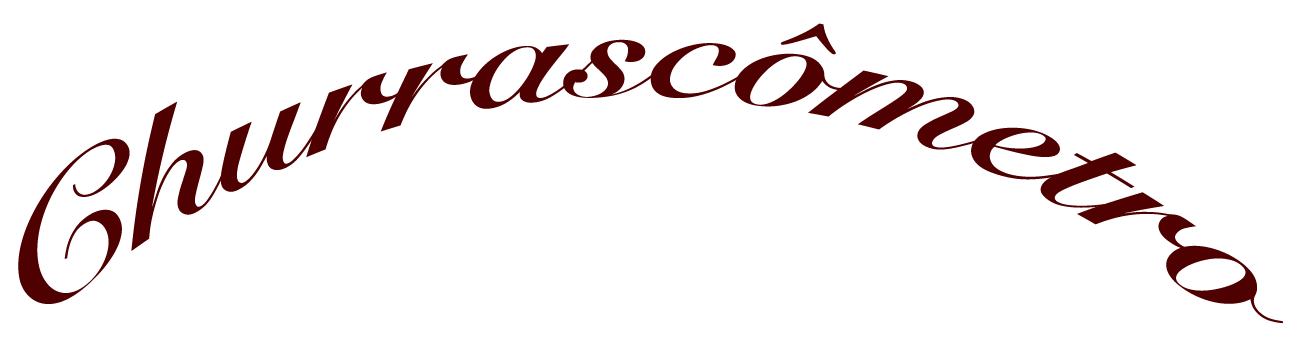
<style>
.page{position:relative;width:1299px;height:346px;background:#ffffff}
.page>*{position:absolute;margin:0}
.t1{font:150px "SnellRoundhand-Bold";color:#4f0000}
</style>
<div class="page">
<p class="t1" style="left:18px;top:23px;width:1265px;height:301px;text-align:center">Churrascômetro</p>
</div>
